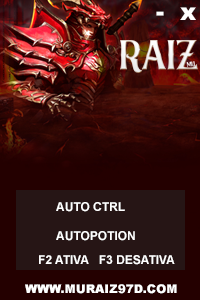
<style>
.page{position:relative;width:200px;height:300px;background:#240000}
.page>*{position:absolute;margin:0}
.t1{font:24px "Arial-Black";color:#ffffff}
.t2{font:12px "Arial-BoldMT";color:#ffffff}
.t3{font:12px "Arial-Black";color:#ffffff}
</style>
<div class="page">
<p class="t1" style="left:156px;top:7px;width:40px;height:13px">-  x</p>
<p class="t2" style="left:56px;top:202px;width:79px;height:39px">AUTO CTRL <br><br>AUTOPOTION</p>
<p class="t2" style="left:39px;top:255px;width:136px;height:10px">F2 ATIVA   F3 DESATIVA</p>
<p class="t3" style="left:25px;top:284px;width:152px;height:10px">WWW.MURAIZ97D.COM</p>
</div>
